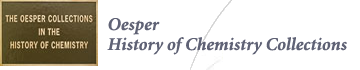
<style>
.page{position:relative;width:360px;height:70px;background:#ffffff}
.page>*{position:absolute;margin:0}
.t1{font:18px/20px "MinionBoldItalic";color:#5f6275}
.t2{font:20px/20px "MinionBoldItalic";color:#5f6275}
</style>
<div class="page">
<p class="t1" style="left:107px;top:18px;width:240px;height:37px;text-align:center"><span class="t2"><br></span>Oesper <br>History of Chemistry Collections</p>
</div>
